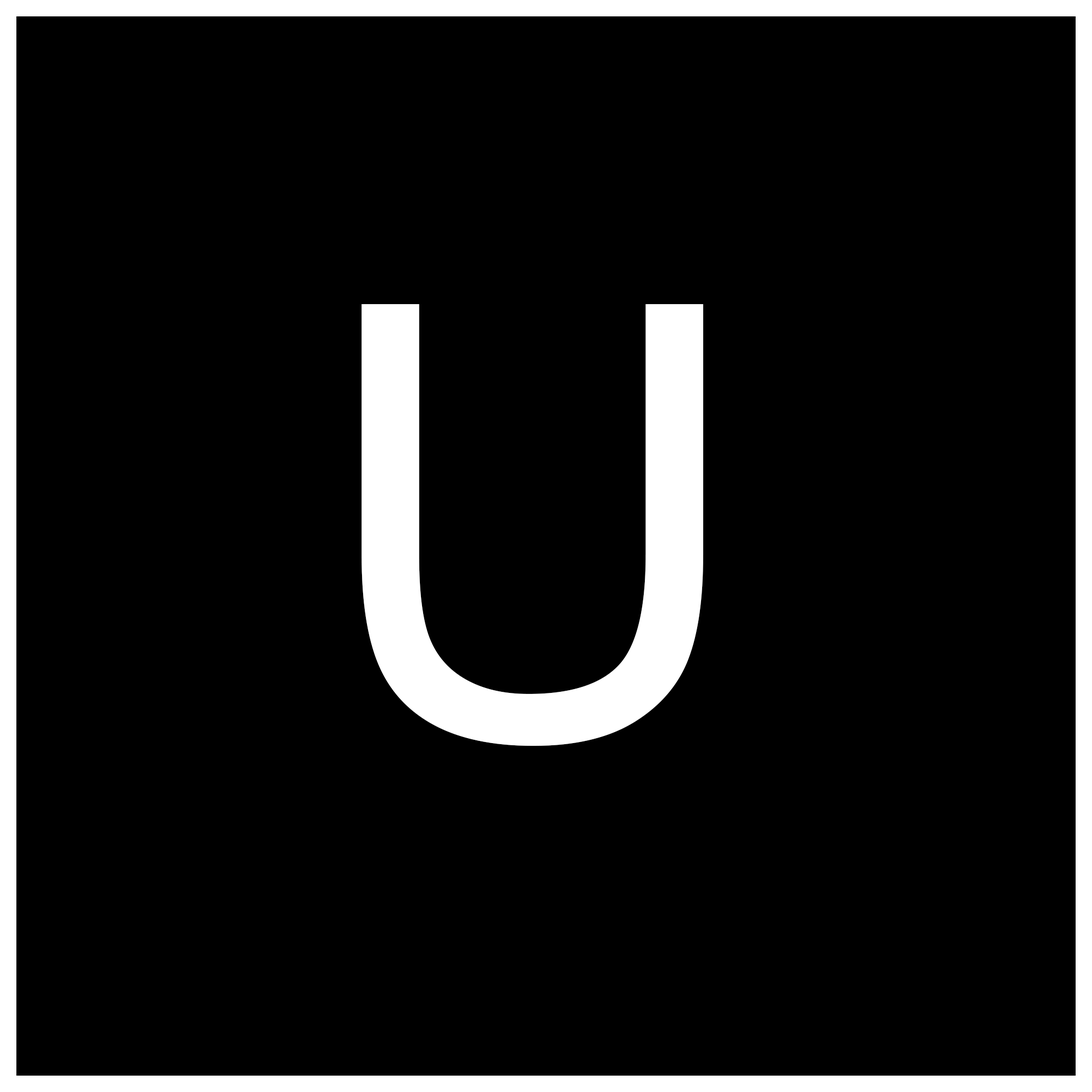
<style>
.page{position:relative;width:1092px;height:1092px;background:#000000}
.page>*{position:absolute;margin:0}
.t1{font:606.7px "ArialMT";color:#ffffff}
</style>
<div class="page">
<p class="t1" style="left:361px;top:304px;width:342px;height:442px">U</p>
</div>
